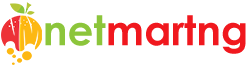
<style>
.page{position:relative;width:250px;height:70px;background:#ffffff}
.page>*{position:absolute;margin:0}
.t1{font:41.2px "CenturyGothic-Bold";color:#f0181e}
.t2{font:41.2px "CenturyGothic-Bold";color:#8cc53b}
</style>
<div class="page">
<p class="t1" style="left:45px;top:15px;width:201px;height:39px"><span class="t2">net</span>martng</p>
</div>
